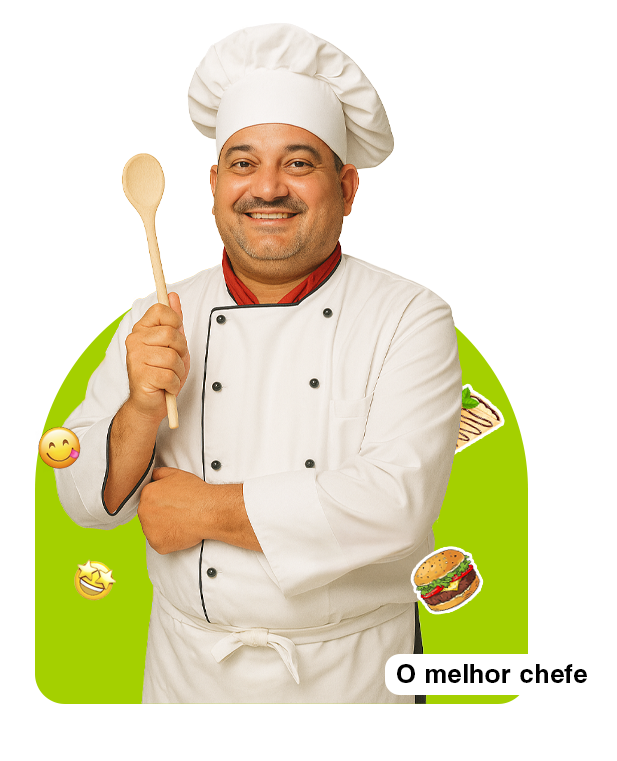
<style>
.page{position:relative;width:617px;height:761px;background:#ffffff}
.page>*{position:absolute;margin:0}
.t1{font:28px "CoolveticaRg-Regular";letter-spacing:0.05em;color:#000000}
</style>
<div class="page">
<p class="t1" style="left:397px;top:664px;width:190px;height:19px">O melhor chefe</p>
</div>
